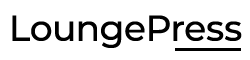
<style>
.page{position:relative;width:250px;height:60px;background:#ffffff}
.page>*{position:absolute;margin:0}
.t1{font:36px "Montserrat-Medium";color:#000000}
</style>
<div class="page">
<p class="t1" style="left:12px;top:15px;width:230px;height:33px">LoungePress</p>
</div>
